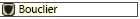
<style>
.page{position:relative;width:140px;height:19px;background:#ffffff}
.page>*{position:absolute;margin:0}
.t1{font:10.9px "LaoUI";color:#000000}
</style>
<div class="page">
<p class="t1" style="left:19px;top:5px;width:39px;height:8px">Bouclier</p>
</div>
